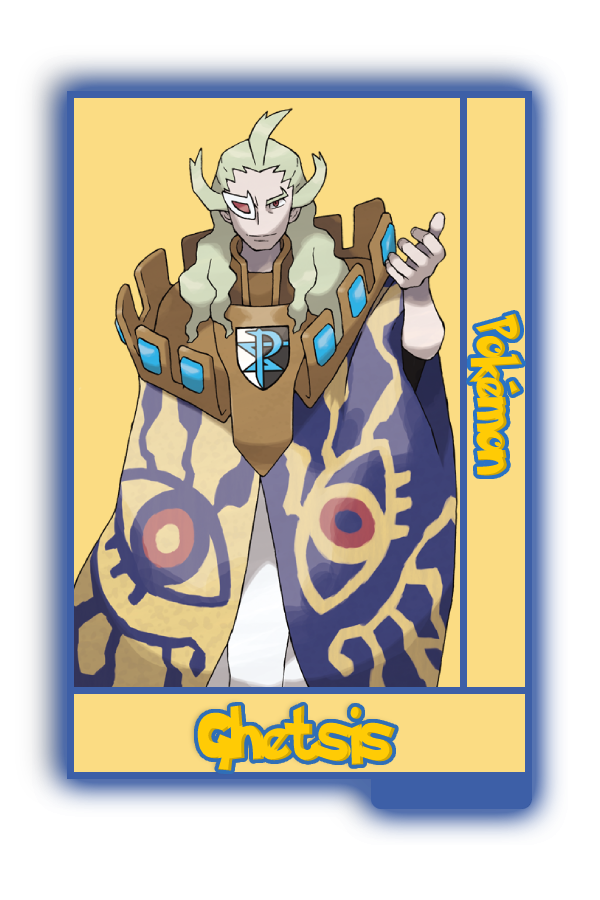
<style>
.page{position:relative;width:600px;height:900px;background:#fbdc83}
.page>*{position:absolute;margin:0}
.t1{font:48.8px "PokemonSolidNormal";color:#ffcb05;scale:0.8 1}
.t2{font:56.6px "PokemonSolidNormal";color:#ffcb05;scale:0.92 1}
</style>
<div class="page">
<p class="t1" style="left:469px;top:313px;width:54px;height:163px;rotate:90deg">Pokémon</p>
<p class="t2" style="left:197px;top:705px;width:198px;height:66px">Ghetsis</p>
</div>
